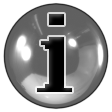
<style>
.page{position:relative;width:112px;height:112px;background:#ffffff}
.page>*{position:absolute;margin:0}
.t1{font:112px "Redaction35-Bold";color:#000000}
</style>
<div class="page">
<p class="t1" style="left:37px;top:14px;width:35px;height:78px">i</p>
</div>
